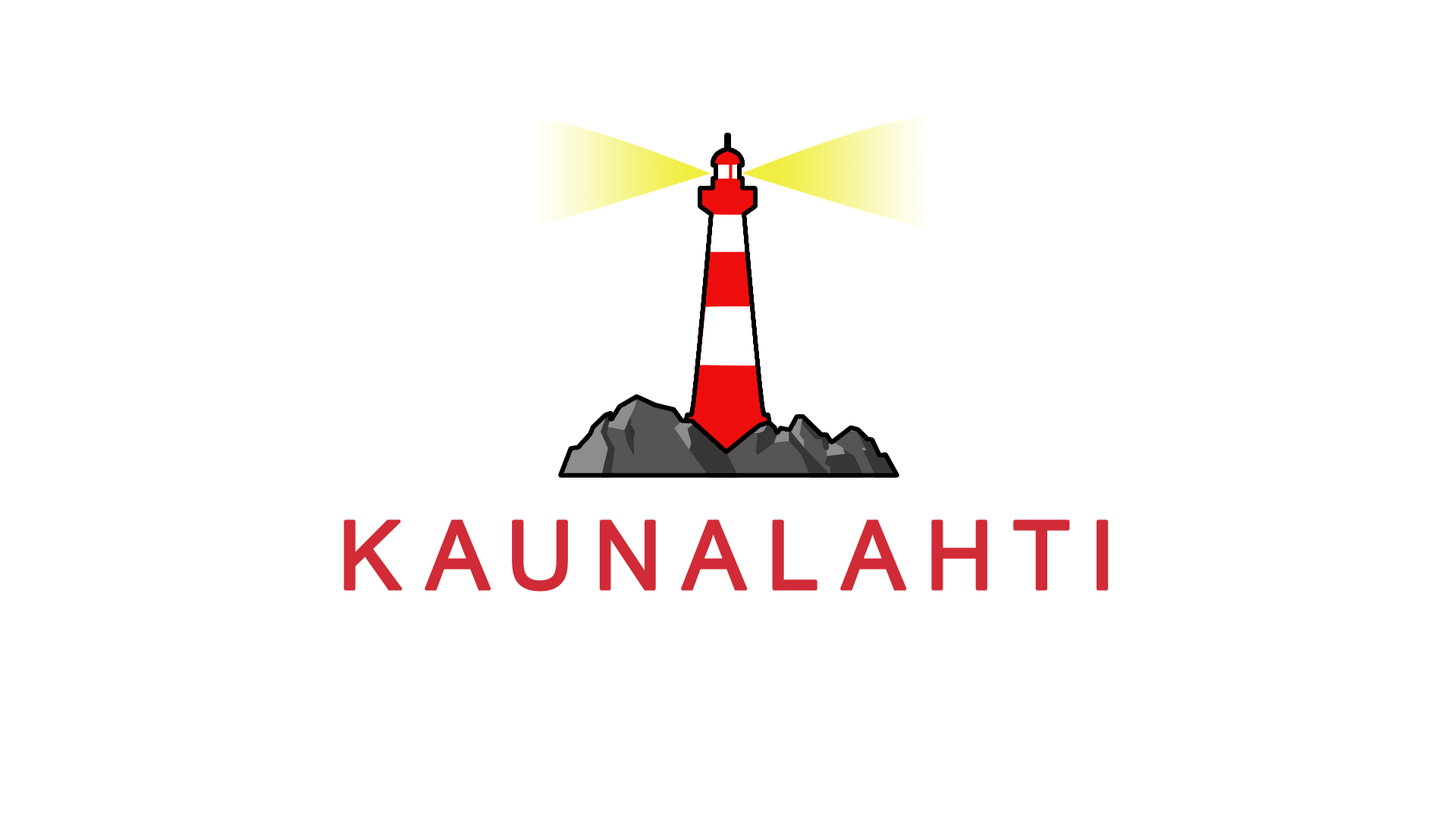
<style>
.page{position:relative;width:1456px;height:819px;background:#ffffff}
.page>*{position:absolute;margin:0}
.t1{font:94.8px "ArialMT";letter-spacing:0.2em;color:#d02b37;font-weight:bold}
</style>
<div class="page">
<p class="t1" style="left:344px;top:519px;width:765px;height:72px">KAUNALAHTI</p>
</div>
